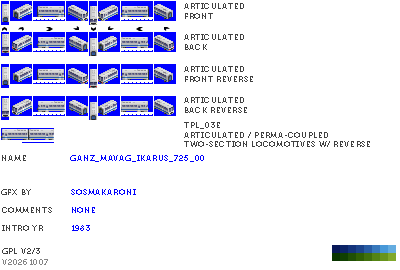
<style>
.page{position:relative;width:400px;height:270px;background:#ffffff}
.page>*{position:absolute;margin:0}
.t1{font:8px "Museo700-Regular";letter-spacing:0.075em;color:#404040;text-transform:uppercase}
.t2{font:8px "Museo700-Regular";letter-spacing:0.075em;color:#0000ff;text-transform:uppercase}
.t3{font:8px "Museo700-Regular";letter-spacing:0.075em;color:#848484;text-transform:uppercase}
</style>
<div class="page">
<p class="t1" style="left:184px;top:3px;width:60px;height:16px">articulated <br>front</p>
<p class="t1" style="left:184px;top:34px;width:60px;height:16px">articulated <br>back</p>
<p class="t1" style="left:184px;top:66px;width:69px;height:16px">articulated <br>front reverse</p>
<p class="t1" style="left:184px;top:97px;width:63px;height:16px">articulated <br>back reverse</p>
<p class="t1" style="left:184px;top:122px;width:186px;height:25px">tpl_03e<br>Articulated / perma-Coupled <br>Two-Section Locomotives w/ reverse</p>
<p class="t1" style="left:2px;top:155px;width:24px;height:6px">name</p>
<p class="t2" style="left:70px;top:155px;width:134px;height:7px">Ganz_MAVAG_Ikarus_725_00</p>
<p class="t1" style="left:1px;top:189px;width:30px;height:6px">gfx by</p>
<p class="t2" style="left:71px;top:189px;width:65px;height:6px">sosmakaroni</p>
<p class="t1" style="left:2px;top:207px;width:50px;height:6px">comments</p>
<p class="t2" style="left:72px;top:207px;width:23px;height:6px">none</p>
<p class="t1" style="left:2px;top:225px;width:41px;height:6px">intro yr</p>
<p class="t2" style="left:72px;top:225px;width:18px;height:6px">1983</p>
<p class="t1" style="left:2px;top:248px;width:38px;height:6px">gpl v2/3</p>
<p class="t3" style="left:2px;top:259px;width:46px;height:6px">v20261007</p>
</div>
